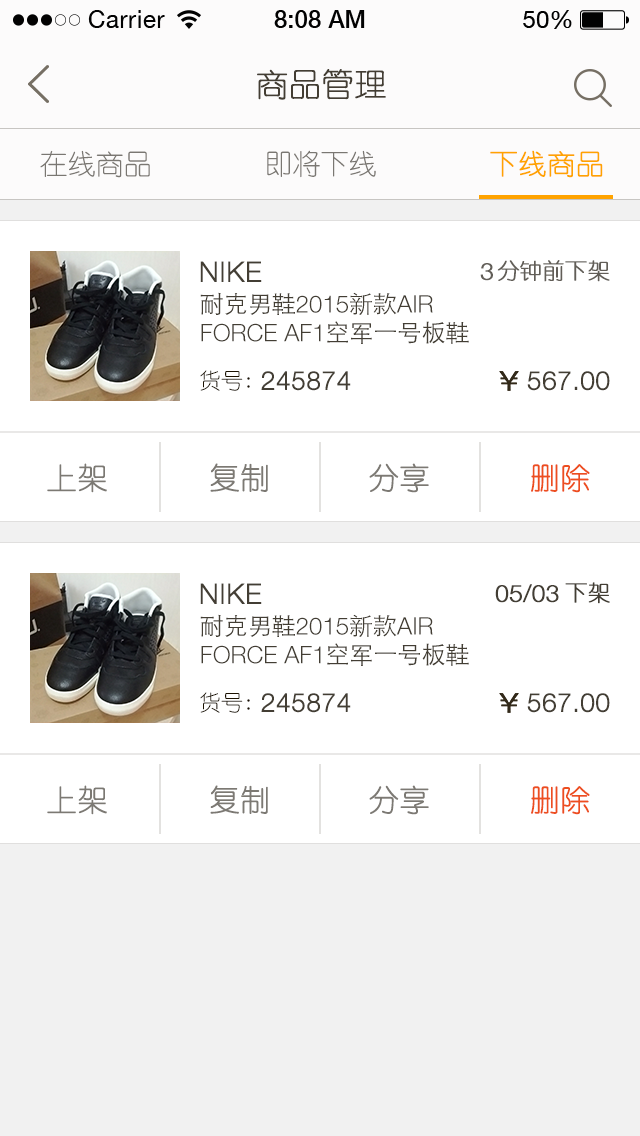
<style>
.page{position:relative;width:640px;height:1136px;background:#ffffff}
.page>*{position:absolute;margin:0}
.t1{font:32px "YouYuan";color:#433d33;text-transform:uppercase;font-weight:bold}
.t2{font:28px "YouYuan";color:#7a7772;text-transform:uppercase}
.t3{font:28px "YouYuan";color:#ffa300;text-transform:uppercase;font-weight:bold}
.t4{font:28px "HelveticaNeueLTPro-Lt";color:#433e34;text-transform:uppercase;font-weight:bold}
.t5{font:24px "HelveticaNeueLTPro-Lt";color:#625e58;text-transform:uppercase;font-weight:bold}
.t6{font:22px "YouYuan";color:#625e58;text-transform:uppercase;font-weight:bold}
.t7{font:24px "HelveticaNeueLTPro-Lt";color:#433e34;text-transform:uppercase}
.t8{font:24px "STHeitiSC-Light";color:#433e34;text-transform:uppercase}
.t9{font:22px "YouYuan";color:#1b1100;text-transform:uppercase}
.t10{font:26px "HelveticaNeueLTPro-Lt";color:#433e34;text-transform:uppercase;font-weight:bold}
.t11{font:30px "YouYuan";color:#7c7973;text-transform:uppercase;font-weight:bold}
.t12{font:30px "YouYuan";color:#ed4e1f;text-transform:uppercase;font-weight:bold}
.t13{font:22px "YouYuan";color:#433e34;text-transform:uppercase;font-weight:bold}
.t14{font:24px "HelveticaNeueLTPro-Lt";color:#433e34;text-transform:uppercase;font-weight:bold}
</style>
<div class="page">
<p class="t1" style="left:257px;top:69px;width:129px;height:31px">商品管理</p>
<p class="t2" style="left:40px;top:150px;width:110px;height:28px">在线商品</p>
<p class="t2" style="left:267px;top:150px;width:109px;height:28px">即将下线</p>
<p class="t3" style="left:490px;top:150px;width:113px;height:28px">下线商品</p>
<p class="t4" style="left:200px;top:261px;width:62px;height:21px">NIKE</p>
<p class="t5" style="left:480px;top:263px;width:13px;height:18px">3</p>
<p class="t6" style="left:497px;top:260px;width:113px;height:22px">分钟前下架</p>
<p class="t7" style="left:200px;top:292px;width:269px;height:52px"><span class="t8">耐克男鞋</span>2015<span class="t8">新款</span>air force AF1<span class="t8">空军一号板鞋</span></p>
<p class="t9" style="left:200px;top:370px;width:50px;height:21px">货号:</p>
<p class="t10" style="left:261px;top:371px;width:90px;height:20px">245874</p>
<p class="t10" style="left:527px;top:371px;width:83px;height:20px">567.00</p>
<p class="t11" style="left:47px;top:463px;width:60px;height:30px">上架</p>
<p class="t11" style="left:210px;top:463px;width:58px;height:29px">复制</p>
<p class="t11" style="left:369px;top:463px;width:60px;height:30px">分享</p>
<p class="t12" style="left:531px;top:464px;width:59px;height:29px">删除</p>
<p class="t13" style="left:565px;top:582px;width:45px;height:22px">下架</p>
<p class="t4" style="left:200px;top:583px;width:62px;height:21px">NIKE</p>
<p class="t14" style="left:495px;top:584px;width:64px;height:19px">05/03</p>
<p class="t7" style="left:200px;top:614px;width:269px;height:52px"><span class="t8">耐克男鞋</span>2015<span class="t8">新款</span>air force AF1<span class="t8">空军一号板鞋</span></p>
<p class="t9" style="left:200px;top:692px;width:50px;height:21px">货号:</p>
<p class="t10" style="left:261px;top:693px;width:90px;height:20px">245874</p>
<p class="t10" style="left:527px;top:693px;width:83px;height:20px">567.00</p>
<p class="t11" style="left:47px;top:785px;width:60px;height:30px">上架</p>
<p class="t11" style="left:210px;top:785px;width:58px;height:29px">复制</p>
<p class="t11" style="left:369px;top:785px;width:60px;height:30px">分享</p>
<p class="t12" style="left:531px;top:786px;width:59px;height:29px">删除</p>
</div>
